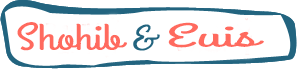
<style>
.page{position:relative;width:297px;height:69px;background:#ffffff}
.page>*{position:absolute;margin:0}
.t1{font:38px "GrandHotel-Regular";color:#ff6a5e;scale:1.34 1}
.t2{font:32.4px "GrandHotel-Regular";color:#ff6a5e;scale:2.19 1}
</style>
<div class="page">
<p class="t1" style="left:17px;top:22px;width:110px;height:29px">Shohib</p>
<p class="t2" style="left:168px;top:22px;width:96px;height:26px">Euis</p>
</div>
